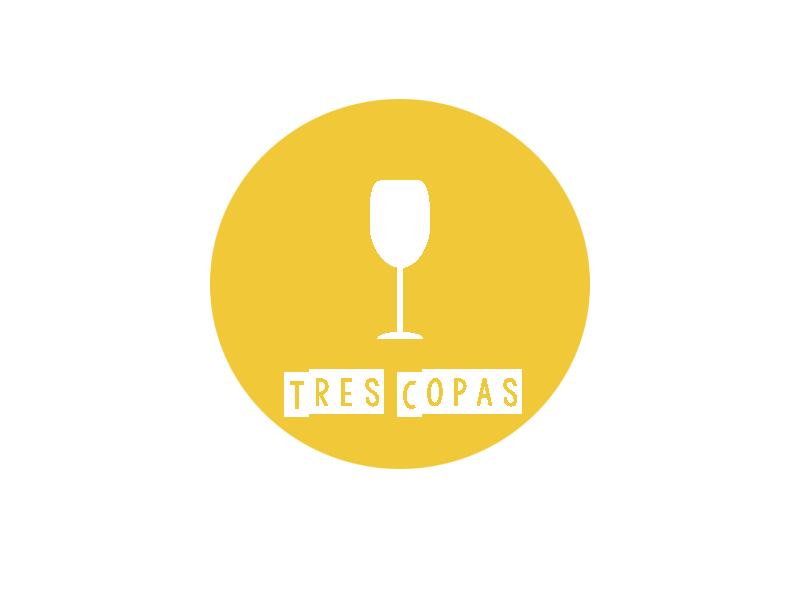
<style>
.page{position:relative;width:800px;height:600px;background:#ffffff}
.page>*{position:absolute;margin:0}
.t1{font:60px "KGDefyingGravityBounce";color:#ffffff}
</style>
<div class="page">
<p class="t1" style="left:284px;top:369px;width:238px;height:48px">Tres Copas</p>
</div>
